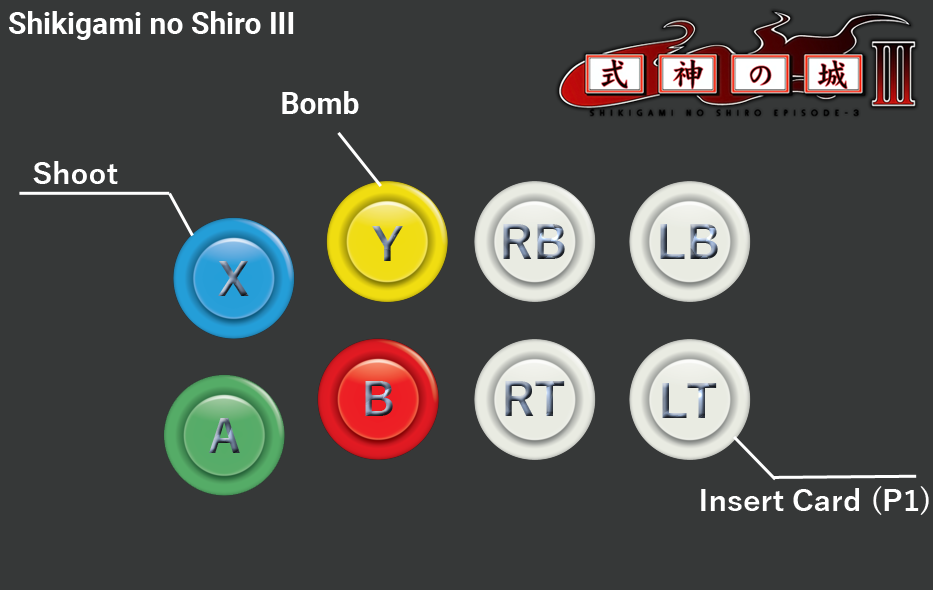
<style>
.page{position:relative;width:933px;height:590px;background:#363838}
.page>*{position:absolute;margin:0}
.t1{font:30px "Roboto-Bold";color:#ffffff}
.t2{font:30px "YuGothic-Bold";color:#ffffff}
</style>
<div class="page">
<p class="t1" style="left:9px;top:11px;width:285px;height:29px">Shikigami no Shiro III</p>
<p class="t1" style="left:282px;top:91px;width:77px;height:23px">Bomb</p>
<p class="t2" style="left:33px;top:161px;width:85px;height:23px">Shoot</p>
<p class="t2" style="left:701px;top:486px;width:228px;height:29px">Insert Card (P1)</p>
</div>
